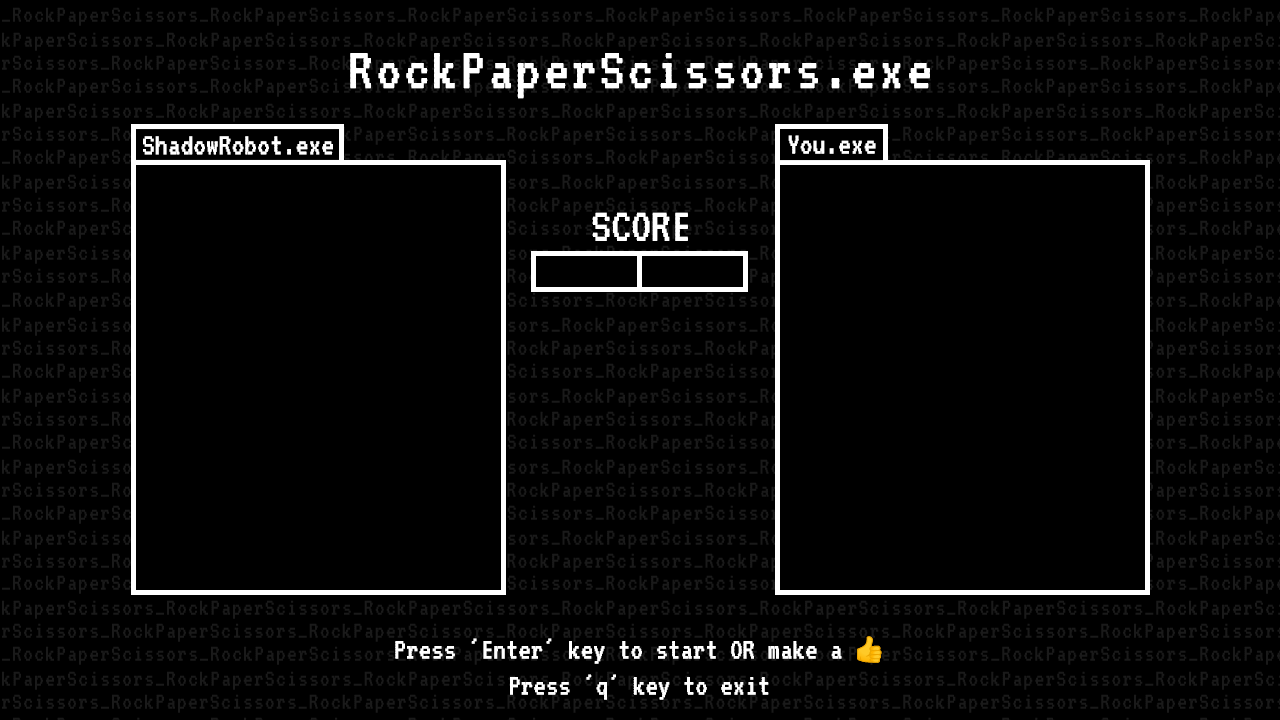
<style>
.page{position:relative;width:1280px;height:720px;background:#000000}
.page>*{position:absolute;margin:0}
.t1{font:60px "VT323-Regular";letter-spacing:0.05em;color:#ffffff}
.t2{font:30.8px "VT323-Regular";color:#ffffff}
.t3{font:48px "VT323-Regular";color:#ffffff}
.t4{font:30px "VT323-Regular";color:#ffffff}
.t5{font:24px "NotoColorEmoji-SVG";color:#ffffff}
</style>
<div class="page">
<p class="t1" style="left:350px;top:53px;width:580px;height:46px">RockPaperScissors.exe</p>
<p class="t2" style="left:143px;top:136px;width:190px;height:19px">ShadowRobot.exe</p>
<p class="t2" style="left:788px;top:135px;width:88px;height:19px">You.exe</p>
<p class="t3" style="left:592px;top:212px;width:96px;height:29px">SCORE</p>
<p class="t4" style="left:395px;top:636px;width:487px;height:64px;text-align:center">Press 'Enter' key to start OR make a <span class="t5">👍<br></span>Press 'q' key to exit</p>
</div>
